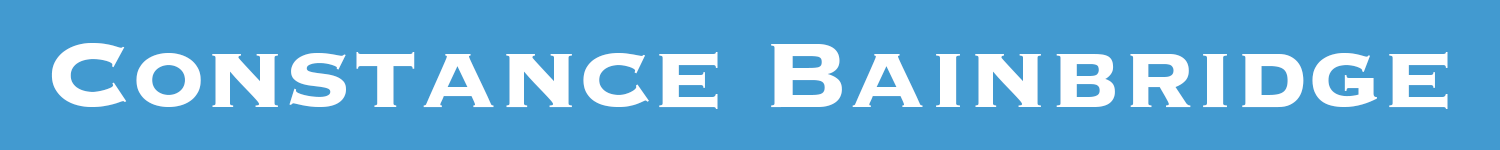
<style>
.page{position:relative;width:1500px;height:150px;background:#429ad0}
.page>*{position:absolute;margin:0}
.t1{font:120px "Copperplate-Bold";color:#ffffff}
</style>
<div class="page">
<p class="t1" style="left:51px;top:43px;width:1397px;height:66px">Constance Bainbridge</p>
</div>
